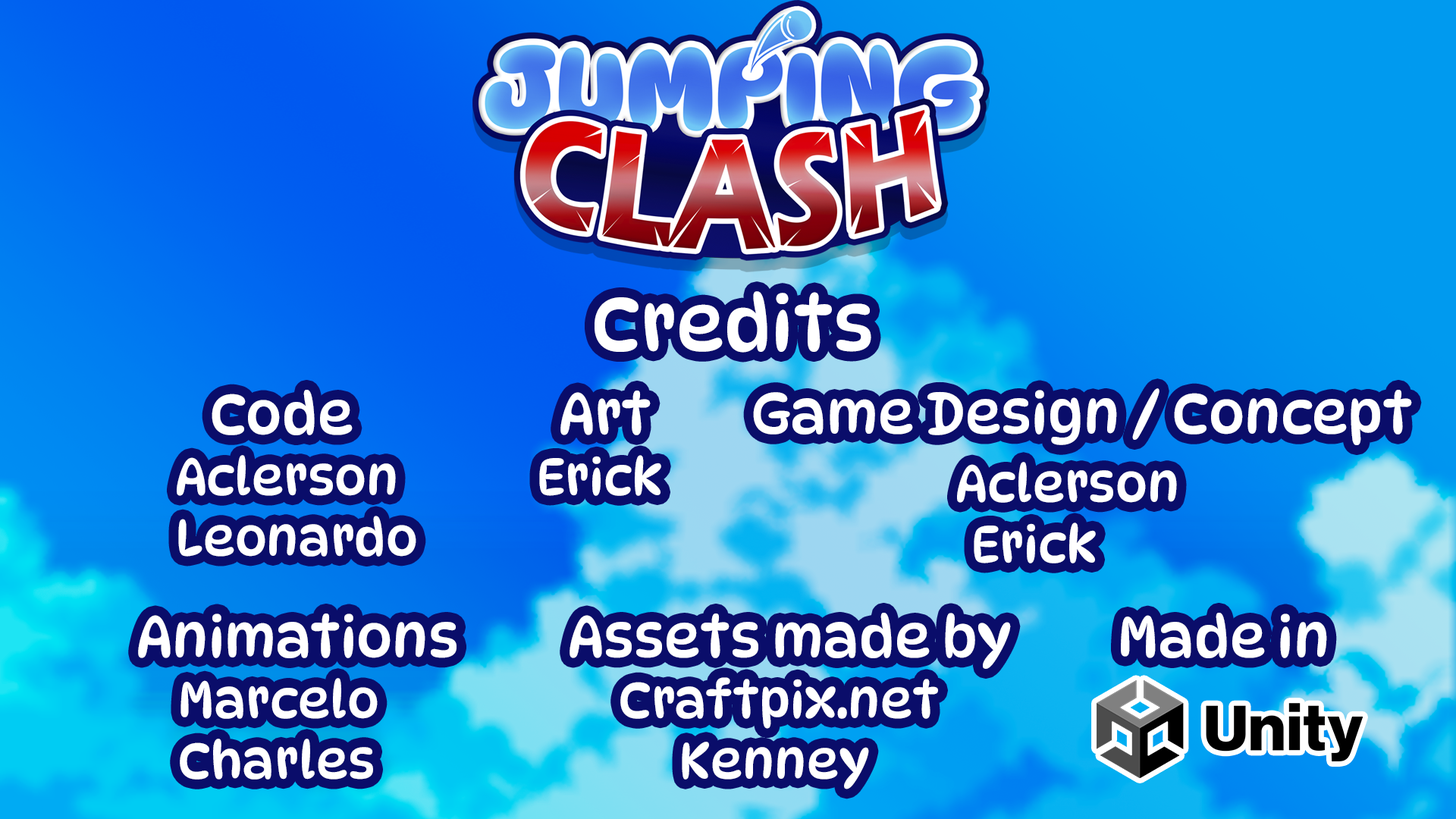
<style>
.page{position:relative;width:1456px;height:819px}
.page>*{position:absolute;margin:0}
.t1{font:75.8px "DynaPuff-Regular";color:#ffffff}
.t2{font:50.6px "DynaPuff-Regular";color:#ffffff}
.t3{font:56.9px "DynaPuff-Regular";color:#ffffff}
</style>
<div class="page">
<p class="t1" style="left:595px;top:291px;width:276px;height:62px">Credits</p>
<p class="t2" style="left:177px;top:390px;width:239px;height:167px"><span class="t3">   Code<br></span>Aclerson<br>Leonardo</p>
<p class="t2" style="left:753px;top:388px;width:659px;height:175px"><span class="t3">  Game Design / Concept<br>                    </span>Aclerson<br>                        Erick</p>
<p class="t2" style="left:539px;top:391px;width:122px;height:105px"><span class="t3">  Art<br></span>Erick</p>
<p class="t2" style="left:138px;top:613px;width:319px;height:167px"><span class="t3">Animations<br></span>    Marcelo<br>    Charles</p>
<p class="t2" style="left:570px;top:613px;width:441px;height:176px"><span class="t3">Assets made by<br></span>     Craftpix.net<br>           Kenney</p>
<p class="t3" style="left:1121px;top:613px;width:206px;height:45px">Made in</p>
</div>
